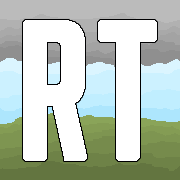
<style>
.page{position:relative;width:180px;height:180px;background:#ffffff}
.page>*{position:absolute;margin:0}
.t1{font:187.5px "BigNoodleTitling";letter-spacing:0.03em;color:#ffffff;font-weight:bold}
</style>
<div class="page">
<p class="t1" style="left:23px;top:20px;width:134px;height:141px">RT</p>
</div>
